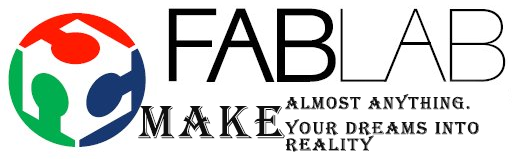
<style>
.page{position:relative;width:512px;height:159px;background:#ffffff}
.page>*{position:absolute;margin:0}
.t1{font:18px "Algerian";letter-spacing:0.08em;color:#0f0f0f}
.t2{font:48px "Algerian";letter-spacing:0.08em;color:#0f0f0f}
.t3{font:30px "Algerian";letter-spacing:0.08em;color:#0f0f0f}
.t4{font:18px/5.5px "Algerian";letter-spacing:0.08em;color:#0f0f0f;scale:1.06 1}
</style>
<div class="page">
<p class="t1" style="left:285px;top:93px;width:185px;height:17px">almost anything.</p>
<p class="t2" style="left:138px;top:106px;width:147px;height:33px"><span class="t3"> <br><br><br>    </span>Make</p>
<p class="t4" style="left:285px;top:119px;width:194px;height:33px">your dreams into <br><br><br>reality</p>
</div>
